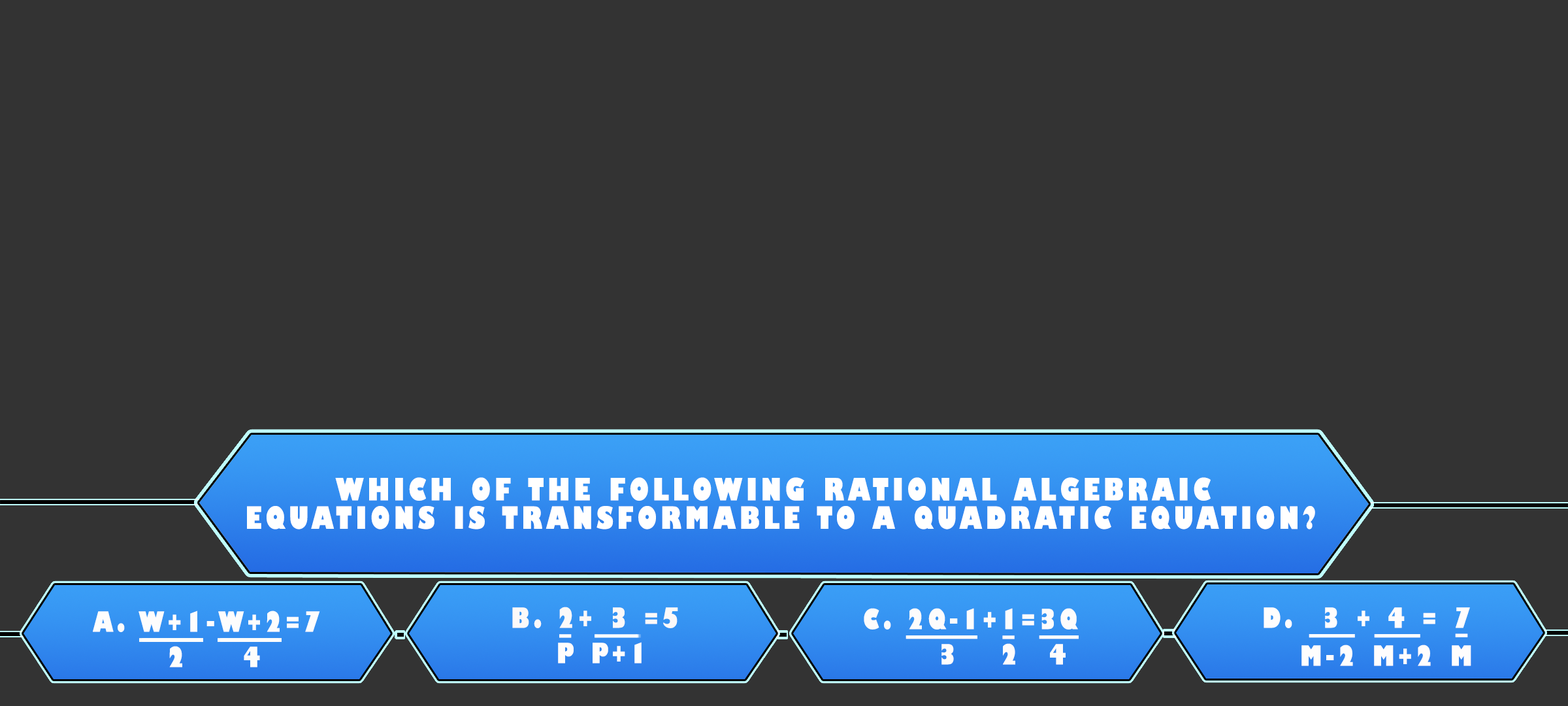
<style>
.page{position:relative;width:1568px;height:706px;background:#333333}
.page>*{position:absolute;margin:0}
.t1{font:30px/28.4px "GillSans-UltraBoldCondensed";letter-spacing:0.115em;color:#ffffff;text-transform:uppercase;scale:1.12 1}
.t2{font:27.2px "GillSans-UltraBoldCondensed";letter-spacing:0.115em;color:#fdfdfd;text-transform:uppercase;scale:1.12 1}
.t3{font:27.2px "GillSans-UltraBoldCondensed";letter-spacing:0.115em;color:#fcf9f9;text-transform:uppercase;scale:1.12 1}
.t4{font:27.2px "GillSans-UltraBoldCondensed";letter-spacing:0.115em;color:#fdfcfc;text-transform:uppercase;scale:1.12 1}
.t5{font:27.2px "GillSans-UltraBoldCondensed";letter-spacing:0.115em;color:#fffdfd;text-transform:uppercase;scale:1.12 1}
.t6{font:27.2px "GillSans-UltraBoldCondensed";letter-spacing:0.115em;color:#fefdfd;text-transform:uppercase;scale:1.12 1}
.t7{font:29.9px "GillSans-UltraBoldCondensed";letter-spacing:0.115em;color:#fefdfd;text-transform:uppercase;scale:1.12 1}
.t8{font:30px "GillSans-UltraBoldCondensed";letter-spacing:0.115em;color:#fffcfc;text-transform:uppercase;scale:6.7 1}
.t9{font:29.9px "GillSans-UltraBoldCondensed";letter-spacing:0.115em;color:#fffcfc;text-transform:uppercase;scale:1.12 1}
.t10{font:30px "GillSans-UltraBoldCondensed";letter-spacing:0.115em;color:#fffcfc;text-transform:uppercase;scale:3.68 1}
.t11{font:30px "GillSans-UltraBoldCondensed";letter-spacing:0.115em;color:#fffdfd;text-transform:uppercase;scale:4.3 1}
.t12{font:29.9px "GillSans-UltraBoldCondensed";letter-spacing:0.115em;color:#fffdfd;text-transform:uppercase;scale:1.12 1}
.t13{font:27.2px "GillSans-UltraBoldCondensed";letter-spacing:0.115em;color:#fdfdfc;text-transform:uppercase;scale:1.12 1}
.t14{font:27.2px "GillSans-UltraBoldCondensed";letter-spacing:0.115em;color:#fffcfc;text-transform:uppercase;scale:1.12 1}
</style>
<div class="page">
<p class="t1" style="left:247px;top:477px;width:1068px;height:52px;text-align:center">Which of the following rational algebraic <br>equations is transformable to a quadratic equation?</p>
<p class="t2" style="left:93px;top:610px;width:227px;height:22px">A. w+1-w+2=7</p>
<p class="t3" style="left:512px;top:606px;width:166px;height:22px">B. 2+ 3 =5</p>
<p class="t4" style="left:864px;top:608px;width:214px;height:21px">C. 2q-1+1=3q</p>
<p class="t5" style="left:1264px;top:607px;width:206px;height:21px">D.  3 + 4 = 7</p>
<p class="t6" style="left:558px;top:642px;width:84px;height:21px">p p+1</p>
<p class="t7" style="left:559px;top:634px;width:13px;height:4px">_</p>
<p class="t8" style="left:906px;top:635px;width:71px;height:4px">_</p>
<p class="t9" style="left:1002px;top:635px;width:13px;height:4px">_</p>
<p class="t10" style="left:1039px;top:635px;width:40px;height:4px">_</p>
<p class="t11" style="left:1309px;top:634px;width:46px;height:4px">_</p>
<p class="t11" style="left:1374px;top:634px;width:46px;height:4px">_</p>
<p class="t12" style="left:1455px;top:633px;width:13px;height:4px">_</p>
<p class="t13" style="left:169px;top:645px;width:91px;height:22px">2    4</p>
<p class="t14" style="left:941px;top:643px;width:125px;height:21px">3   2  4</p>
<p class="t5" style="left:1301px;top:644px;width:170px;height:22px">M-2 M+2 M</p>
</div>
